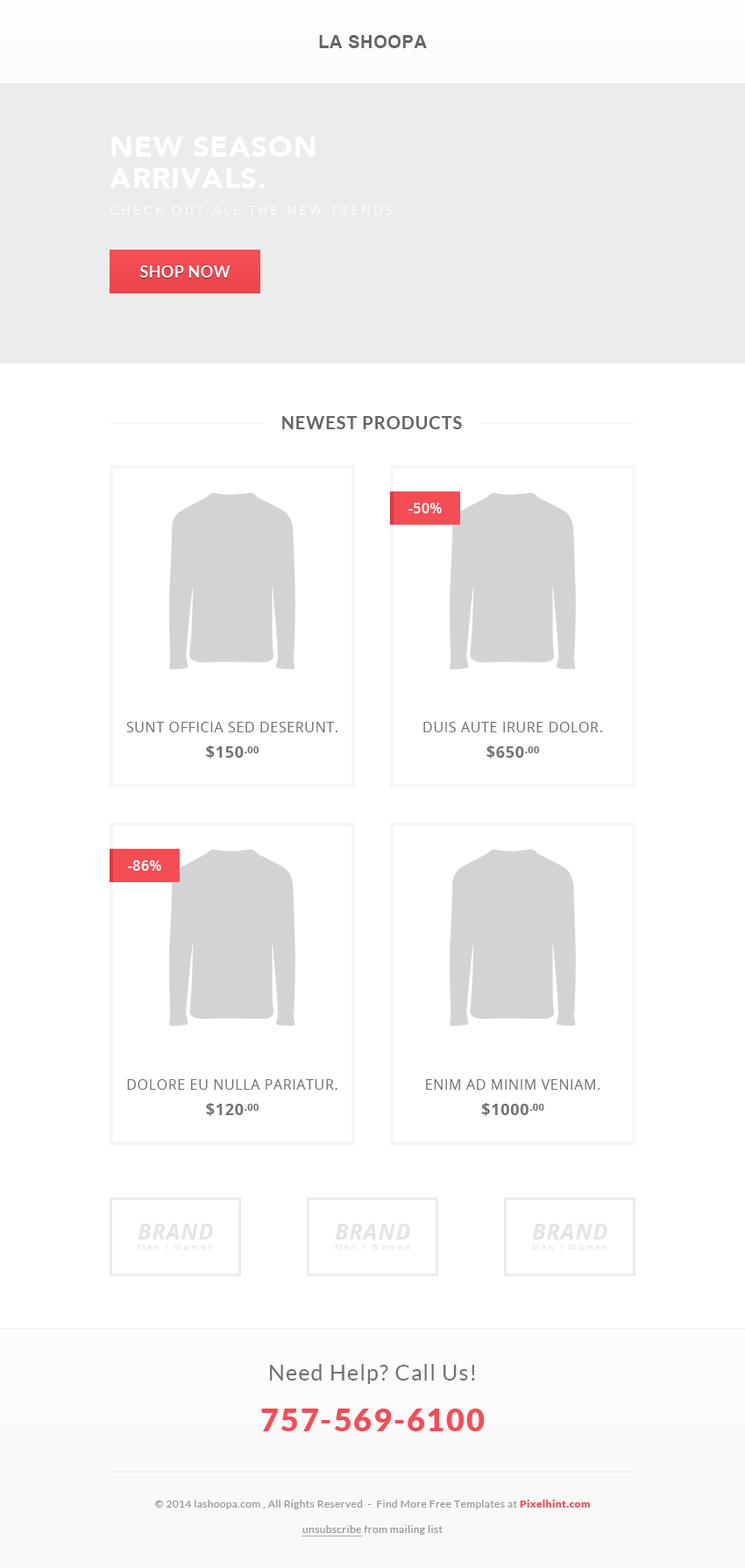
<style>
.page{position:relative;width:745px;height:1568px;background:#ffffff}
.page>*{position:absolute;margin:0}
.t1{font:17.5px "Arial-BoldMT";letter-spacing:0.03em;color:#656363;text-transform:uppercase}
.t2{font:28.8px/31.5px "AvenirLT-Black";letter-spacing:0.03em;color:#ffffff;text-transform:uppercase}
.t3{font:12.3px "AvenirLT-Light";letter-spacing:0.245em;color:#ffffff;text-transform:uppercase}
.t4{font:15.8px "Lato-Bold";letter-spacing:0.03em;color:#ffffff;text-transform:uppercase}
.t5{font:17.5px "Lato-Bold";letter-spacing:0.05em;color:#656363;text-transform:uppercase}
.t6{font:14px "OpenSans-Semibold";letter-spacing:0.03em;color:#ffffff}
.t7{font:14px "OpenSans";letter-spacing:0.04em;color:#717171;text-transform:uppercase}
.t8{font:15.8px "OpenSans-Bold";letter-spacing:0.04em;color:#717171;text-transform:uppercase}
.t9{font:16.6px "OpenSans-Bold";letter-spacing:0.04em;color:#717171;text-transform:uppercase}
.t10{font:8.8px "OpenSans-Light";letter-spacing:0.22em;color:#e4e4e4}
.t11{font:21.9px "OpenSans-BoldItalic";letter-spacing:0.04em;color:#e4e4e4;text-transform:uppercase}
.t12{font:21.9px "Lato-Regular";letter-spacing:0.05em;color:#717171}
.t13{font:31.5px "Lato-Black";letter-spacing:0.05em;color:#f54d56}
.t14{font:10.5px "Lato-Regular";letter-spacing:0.03em;color:#989797}
.t15{font:10.5px "Lato-Black";letter-spacing:0.03em;color:#f54d56}
</style>
<div class="page">
<p class="t1" style="left:319px;top:35px;width:108px;height:13px">La Shoopa</p>
<p class="t2" style="left:109px;top:137px;width:206px;height:51px">NEW SEASON <br>ARRIVALS.</p>
<p class="t3" style="left:109px;top:206px;width:283px;height:9px">CHECK OUT ALL THE NEW TRENDS</p>
<p class="t4" style="left:140px;top:265px;width:90px;height:13px">Shop Now</p>
<p class="t5" style="left:282px;top:416px;width:180px;height:13px">Newest Products</p>
<p class="t6" style="left:408px;top:503px;width:33px;height:10px">-50%</p>
<p class="t7" style="left:126px;top:722px;width:211px;height:10px">Sunt Officia sed deserunt.</p>
<p class="t7" style="left:423px;top:722px;width:179px;height:10px">Duis aute irure dolor.</p>
<p class="t8" style="left:206px;top:745px;width:52px;height:14px">$150<span class="t9">.00</span></p>
<p class="t8" style="left:486px;top:745px;width:53px;height:14px">$650<span class="t9">.00</span></p>
<p class="t6" style="left:128px;top:860px;width:33px;height:11px">-86%</p>
<p class="t7" style="left:127px;top:1079px;width:210px;height:11px">dolore eu nulla pariatur.</p>
<p class="t7" style="left:426px;top:1079px;width:173px;height:11px">enim ad minim veniam.</p>
<p class="t8" style="left:206px;top:1103px;width:52px;height:13px">$120<span class="t9">.00</span></p>
<p class="t8" style="left:482px;top:1103px;width:62px;height:13px">$1000<span class="t9">.00</span></p>
<p class="t10" style="left:138px;top:1224px;width:75px;height:26px"><span class="t11">BRAND<br></span>Men / Women</p>
<p class="t10" style="left:335px;top:1224px;width:75px;height:26px"><span class="t11">BRAND<br></span>Men / Women</p>
<p class="t10" style="left:532px;top:1224px;width:75px;height:26px"><span class="t11">BRAND<br></span>Men / Women</p>
<p class="t12" style="left:270px;top:1364px;width:205px;height:20px">Need Help? Call Us!</p>
<p class="t13" style="left:261px;top:1409px;width:223px;height:22px">757-569-6100</p>
<p class="t14" style="left:155px;top:1500px;width:435px;height:9px">© 2014 lashoopa.com , All Rights Reserved  -  Find More Free Templates at <span class="t15">Pixelhint.com</span></p>
<p class="t14" style="left:302px;top:1525px;width:140px;height:10px">unsubscribe from mailing list</p>
</div>
